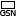
<style>
.page{position:relative;width:16px;height:16px;background:#ffffff}
.page>*{position:absolute;margin:0}
.t1{font:7.5px "BitstreamVeraSans-Roman";color:#000000}
</style>
<div class="page">
<p class="t1" style="left:0px;top:10px;width:16px;height:6px">GSN</p>
</div>
